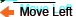
<style>
.page{position:relative;width:76px;height:17px;background:#ffffff}
.page>*{position:absolute;margin:0}
.t1{font:12px "ArialMT"}
</style>
<div class="page">
<p class="t1" style="left:20px;top:4px;width:53px;height:9px">Move Left</p>
</div>
